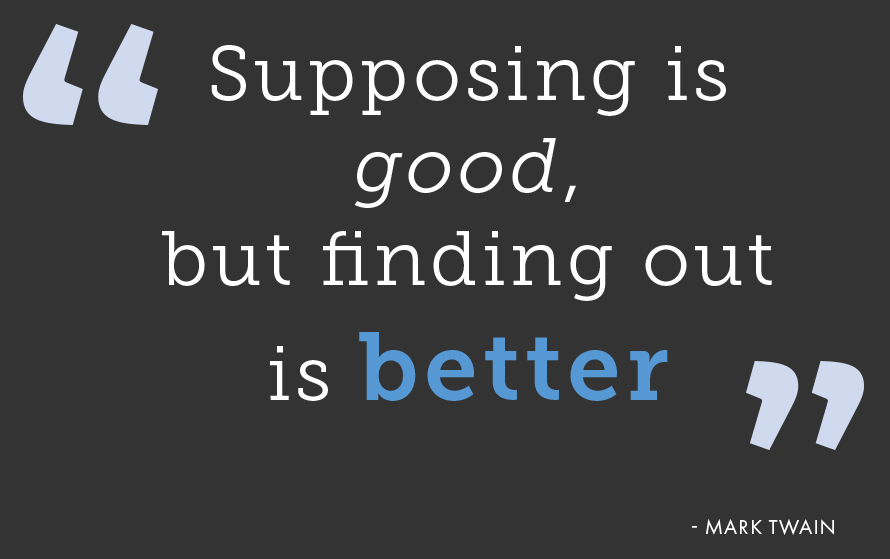
<style>
.page{position:relative;width:890px;height:559px;background:#333333}
.page>*{position:absolute;margin:0}
.t1{font:77.1px "MuseoSlab-300";letter-spacing:0.055em;color:#ffffff}
.t2{font:77.1px "MuseoSlab-300Italic";letter-spacing:0.055em;color:#ffffff}
.t3{font:96.3px "MuseoSlab-700";letter-spacing:0.055em;color:#5698d4}
.t4{font:21px "FuturaPT-Book";letter-spacing:0.055em;color:#ffffff;text-transform:uppercase}
</style>
<div class="page">
<p class="t1" style="left:162px;top:45px;width:610px;height:356px;text-align:center">Supposing is <span class="t2">good</span>, <br>but finding out is <span class="t3">better</span></p>
<p class="t4" style="left:692px;top:519px;width:142px;height:16px">- Mark Twain</p>
</div>
